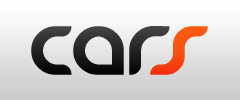
<style>
.page{position:relative;width:240px;height:100px}
.page>*{position:absolute;margin:0}
.t1{font:60px "Danube";font-weight:bold}
.t2{font:60px "Danube";color:#f85310;font-weight:bold}
</style>
<div class="page">
<p class="t1" style="left:31px;top:26px;width:139px;height:49px">car</p>
<p class="t2" style="left:150px;top:26px;width:58px;height:49px">s</p>
</div>
